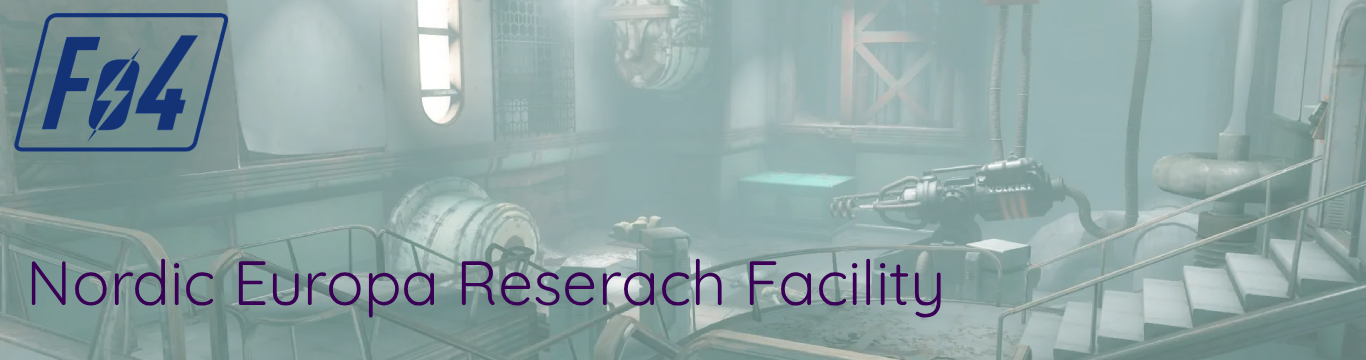
<style>
.page{position:relative;width:1366px;height:360px}
.page>*{position:absolute;margin:0}
.t1{font:62.4px "Quicksand-Regular";color:#390056}
</style>
<div class="page">
<p class="t1" style="left:31px;top:258px;width:910px;height:60px">Nordic Europa Reserach Facility</p>
</div>
